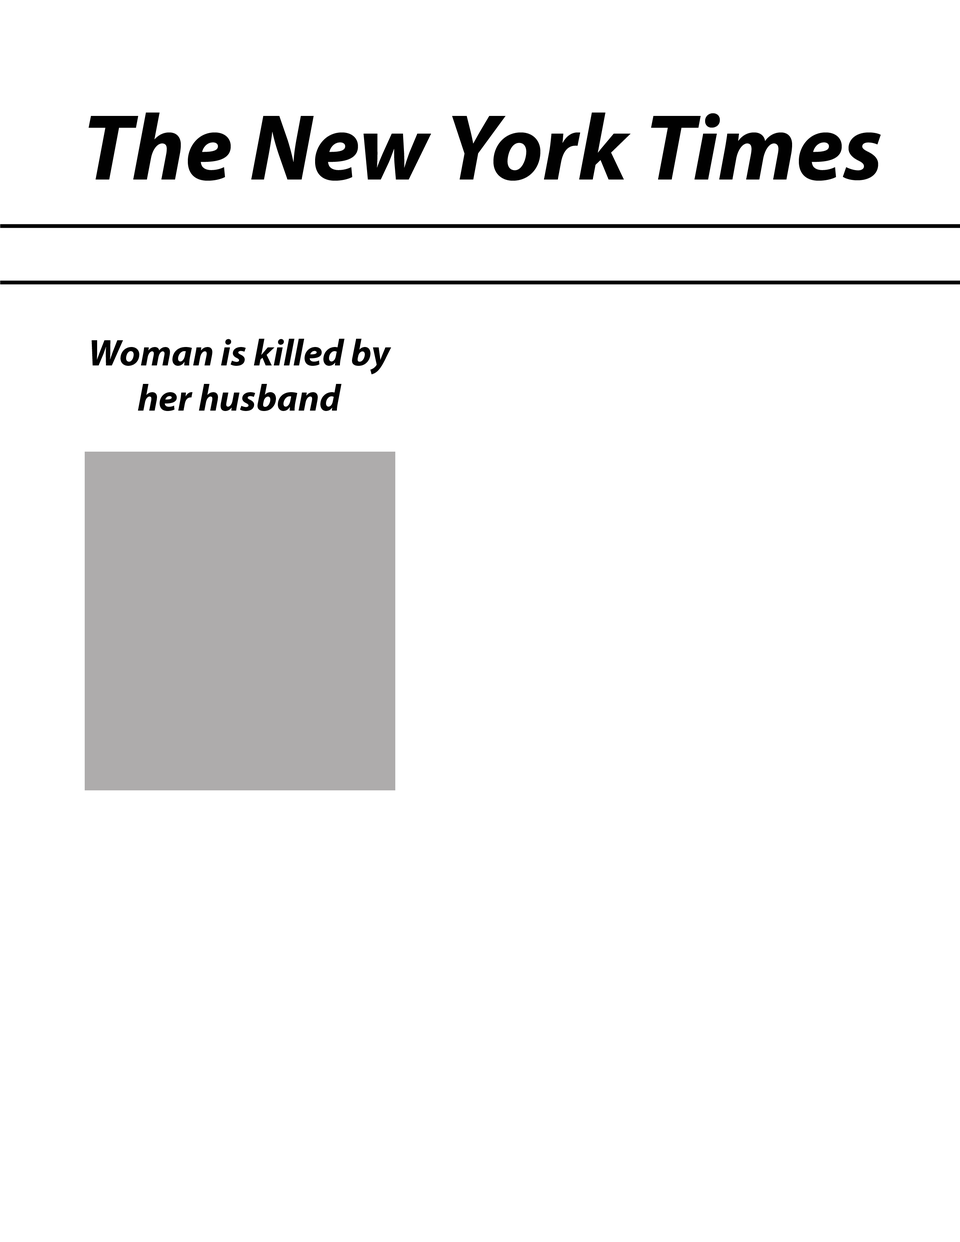
<style>
.page{position:relative;width:960px;height:1242px;background:#ffffff}
.page>*{position:absolute;margin:0}
.t1{font:94.1px "MyriadPro-BoldIt";color:#010101}
.t2{font:28.2px "MyriadPro-BoldIt";color:#010101}
.t3{font:37.6px "MyriadPro-BoldIt";color:#010101}
</style>
<div class="page">
<p class="t1" style="left:88px;top:113px;width:793px;height:68px"><span class="t2"> </span>The New York Times</p>
<p class="t3" style="left:91px;top:339px;width:300px;height:72px;text-align:center">Woman is killed by her husband</p>
</div>
